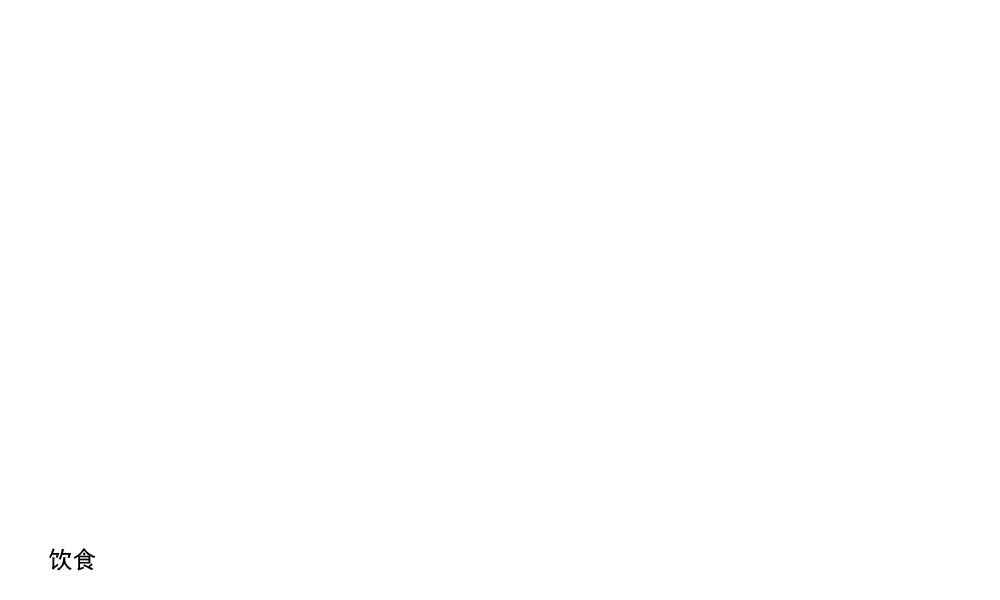
<style>
.page{position:relative;width:1000px;height:600px;background:#ffffff}
.page>*{position:absolute;margin:0}
.t1{font:24px "SimHei";color:#000000}
</style>
<div class="page">
<p class="t1" style="left:49px;top:548px;width:47px;height:23px">饮食</p>
</div>
